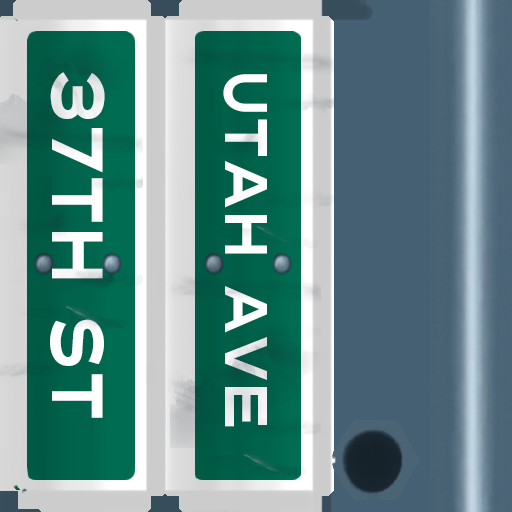
<style>
.page{position:relative;width:512px;height:512px}
.page>*{position:absolute;margin:0}
.t1{font:72px "Turnpike";color:#fefeff;scale:0.75 1}
.t2{font:60px "Turnpike";color:#fefeff;scale:0.75 1}
</style>
<div class="page">
<p class="t1" style="left:50px;top:72px;width:55px;height:346px;rotate:90deg">37th st</p>
<p class="t2" style="left:223px;top:74px;width:44px;height:353px;rotate:90deg">Utah Ave</p>
</div>
